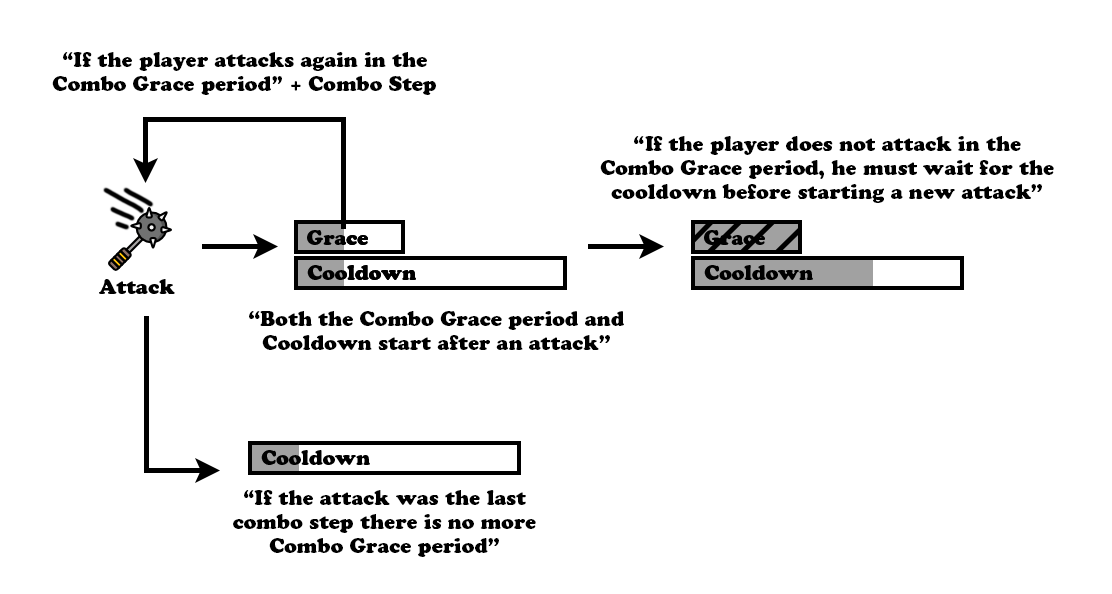
<style>
.page{position:relative;width:1112px;height:594px;background:#ffffff}
.page>*{position:absolute;margin:0}
.t1{font:20px "CooperBlackStd";color:#000000}
</style>
<div class="page">
<p class="t1" style="left:52px;top:52px;width:384px;height:43px;text-align:center">“If the player attacks again in the Combo Grace period” + Combo Step</p>
<p class="t1" style="left:600px;top:136px;width:454px;height:67px;text-align:center">“If the player does not attack in the Combo Grace period, he must wait for the cooldown before starting a new attack”</p>
<p class="t1" style="left:249px;top:311px;width:375px;height:39px;text-align:center">“Both the Combo Grace period and Cooldown start after an attack”</p>
<p class="t1" style="left:233px;top:490px;width:303px;height:67px;text-align:center">“If the attack was the last combo step there is no more Combo Grace period”</p>
</div>
